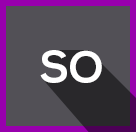
<style>
.page{position:relative;width:136px;height:132px;background:#525056}
.page>*{position:absolute;margin:0}
.t1{font:44px "NexaBold";color:#ffffff}
</style>
<div class="page">
<p class="t1" style="left:40px;top:50px;width:62px;height:33px">SO</p>
</div>
